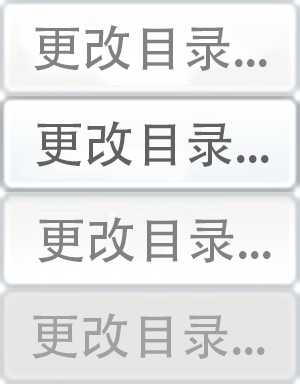
<style>
.page{position:relative;width:300px;height:384px}
.page>*{position:absolute;margin:0}
.t1{font:50px "AdobeHeitiStd-Regular";color:#818181}
.t2{font:50px "AdobeHeitiStd-Regular";color:#626161}
.t3{font:50px "AdobeHeitiStd-Regular";color:#a1a1a1}
</style>
<div class="page">
<p class="t1" style="left:34px;top:25px;width:233px;height:46px">更改目录...</p>
<p class="t2" style="left:36px;top:121px;width:233px;height:46px">更改目录...</p>
<p class="t1" style="left:38px;top:217px;width:233px;height:46px">更改目录...</p>
<p class="t3" style="left:32px;top:313px;width:233px;height:46px">更改目录...</p>
</div>
